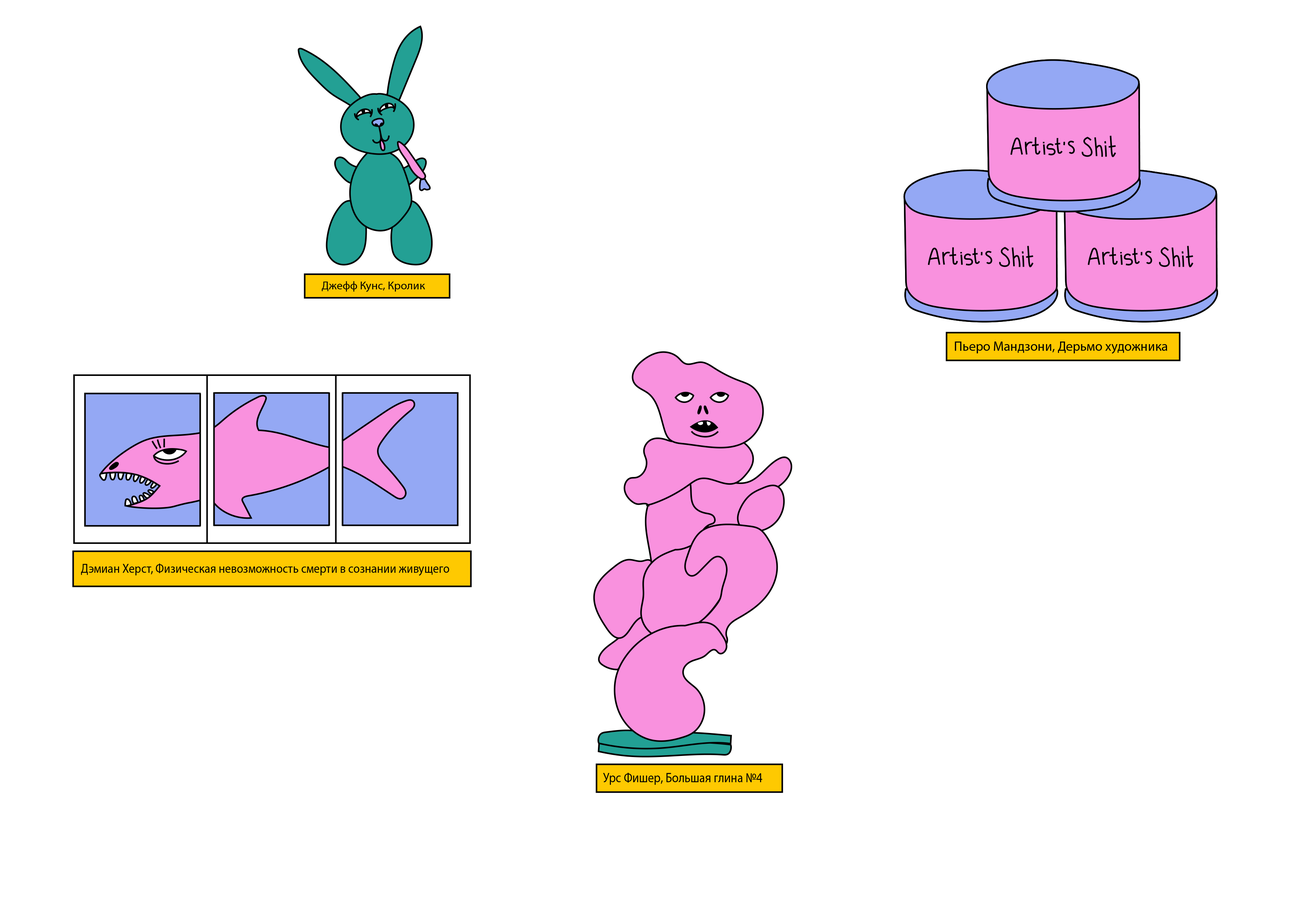
<style>
.page{position:relative;width:1298px;height:918px;background:#ffffff}
.page>*{position:absolute;margin:0}
.t1{font:11.5px "MabryPro-Light";color:#000000}
.t2{font:13.5px "MabryPro-Light";color:#000000}
.t3{font:13px "MabryPro-Light";color:#000000;scale:0.9 1}
.t4{font:13.5px "MabryPro-Light";color:#000000;scale:0.88 1}
</style>
<div class="page">
<p class="t1" style="left:322px;top:281px;width:103px;height:11px">Джефф Кунс, Кролик</p>
<p class="t2" style="left:955px;top:342px;width:213px;height:12px">Пьеро Мандзони, Дерьмо художника</p>
<p class="t3" style="left:81px;top:564px;width:368px;height:12px">Дэмиан Херст, Физическая невозможность смерти в сознании живущего</p>
<p class="t4" style="left:603px;top:773px;width:160px;height:12px">Урс Фишер, Большая глина №4</p>
</div>
